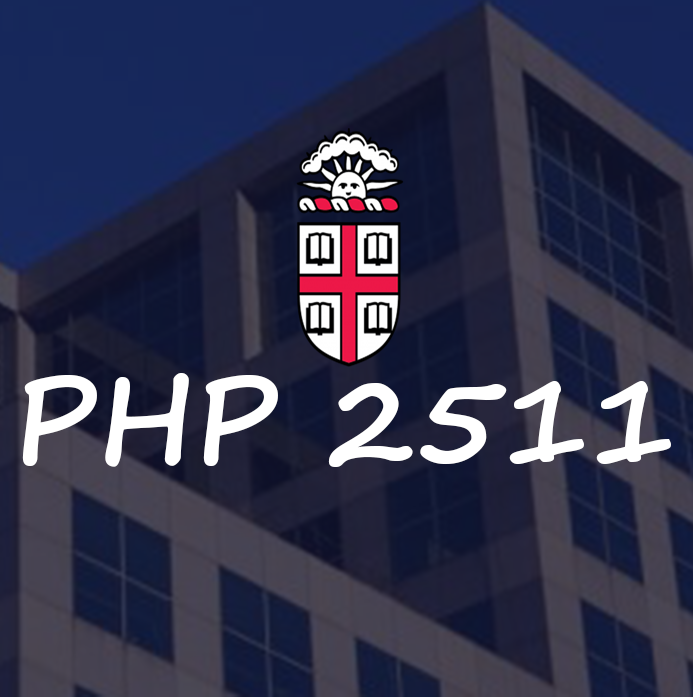
<style>
.page{position:relative;width:693px;height:697px}
.page>*{position:absolute;margin:0}
.t1{font:120px "SegoePrint-Bold";color:#ffffff}
</style>
<div class="page">
<p class="t1" style="left:22px;top:373px;width:649px;height:94px">PHP 2511</p>
</div>
